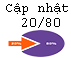
<style>
.page{position:relative;width:71px;height:58px;background:#ffffff}
.page>*{position:absolute;margin:0}
.t1{font:14px/15px "CourierNewPSMT";color:#000000}
</style>
<div class="page">
<p class="t1" style="left:6px;top:3px;width:62px;height:25px;text-align:center">Cập nhật <br>20/80</p>
</div>
